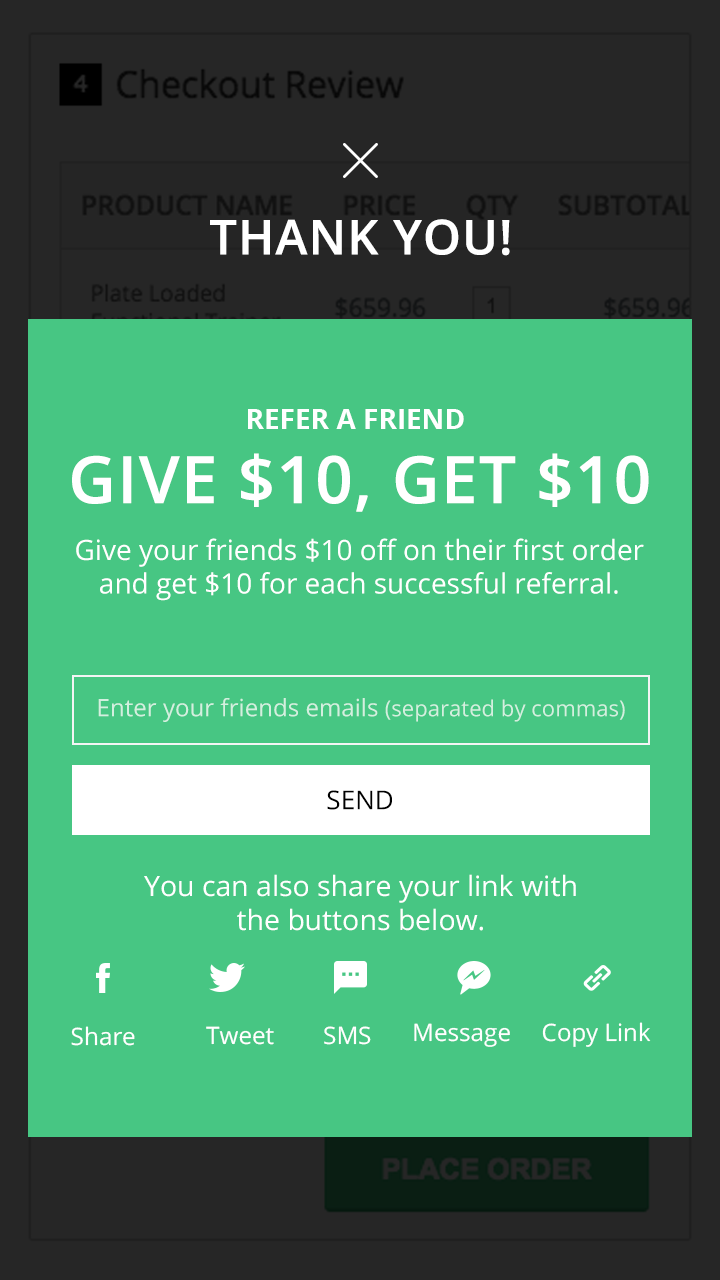
<style>
.page{position:relative;width:720px;height:1280px;background:#47c683}
.page>*{position:absolute;margin:0}
.t1{font:48px "OpenSans-Semibold";color:#ffffff;text-transform:uppercase;font-weight:bold}
.t2{font:28px "OpenSans-Bold";color:#ffffff;text-transform:uppercase}
.t3{font:65px "OpenSans-Semibold";color:#ffffff;text-transform:uppercase;font-weight:bold}
.t4{font:28px "OpenSans-Regular";color:#ffffff}
.t5{font:24px "OpenSans-Regular";letter-spacing:0.002em;color:#d3efdf}
.t6{font:22px "OpenSans-Regular";letter-spacing:0.002em;color:#d3efdf}
.t7{font:26px "OpenSans-Regular";letter-spacing:0.002em;color:#000000}
.t8{font:24px "OpenSans-Regular";color:#ffffff}
</style>
<div class="page">
<p class="t1" style="left:210px;top:219px;width:300px;height:37px">THANK YOU!</p>
<p class="t2" style="left:248px;top:409px;width:216px;height:20px">REFER A FRIEND</p>
<p class="t3" style="left:72px;top:453px;width:577px;height:59px">Give $10, Get $10</p>
<p class="t4" style="left:76px;top:538px;width:568px;height:63px;text-align:center">Give your friends $10 off on their first order<br>and get $10 for each successful referral.</p>
<p class="t5" style="left:98px;top:698px;width:527px;height:24px">Enter your friends emails <span class="t6">(separated by commas)</span></p>
<p class="t7" style="left:327px;top:790px;width:65px;height:20px">SEND</p>
<p class="t4" style="left:144px;top:874px;width:432px;height:57px;text-align:center">You can also share your link with<br>the buttons below.</p>
<p class="t8" style="left:414px;top:1023px;width:96px;height:24px">Message</p>
<p class="t8" style="left:542px;top:1022px;width:109px;height:25px">Copy Link</p>
<p class="t8" style="left:71px;top:1026px;width:64px;height:20px">Share</p>
<p class="t8" style="left:206px;top:1026px;width:68px;height:19px">Tweet</p>
<p class="t8" style="left:324px;top:1026px;width:47px;height:19px">SMS</p>
</div>
